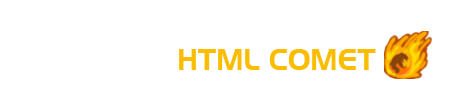
<style>
.page{position:relative;width:453px;height:106px;background:#ffffff}
.page>*{position:absolute;margin:0}
.t1{font:30px "Slicker";color:#fbbd01}
</style>
<div class="page">
<p class="t1" style="left:179px;top:49px;width:197px;height:21px">HTML COMET</p>
</div>
